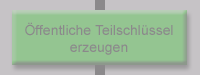
<style>
.page{position:relative;width:200px;height:75px;background:#94c591}
.page>*{position:absolute;margin:0}
.t1{font:14px "ArialMT";color:#8b898b}
</style>
<div class="page">
<p class="t1" style="left:25px;top:22px;width:148px;height:33px;text-align:center">Öffentliche Teilschlüssel<br>erzeugen</p>
</div>
